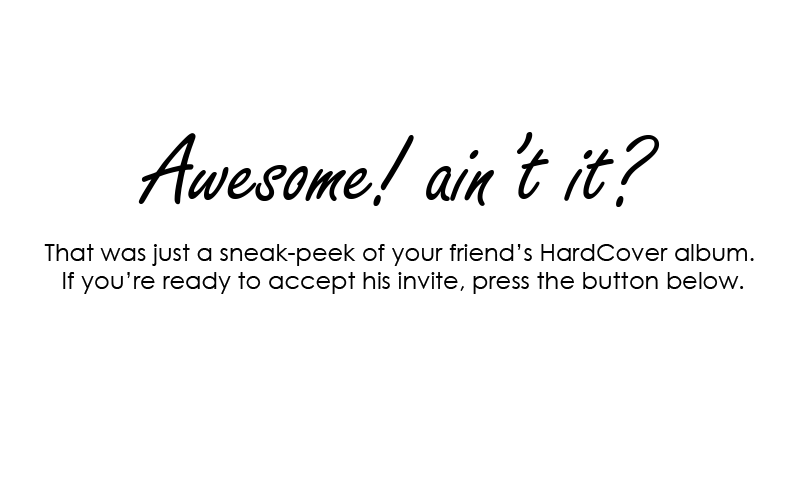
<style>
.page{position:relative;width:800px;height:478px;background:#ffffff}
.page>*{position:absolute;margin:0}
.t1{font:104px "FreestyleScript-Regular";color:#000000}
.t2{font:24px "CenturyGothic";color:#000000}
</style>
<div class="page">
<p class="t1" style="left:138px;top:132px;width:522px;height:75px">Awesome! ain’t it?</p>
<p class="t2" style="left:44px;top:244px;width:710px;height:50px;text-align:center">That was just a sneak-peek of your friend’s HardCover album. <br>If you’re ready to accept his invite, press the button below.</p>
</div>
